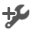
<style>
.page{position:relative;width:32px;height:32px;background:#ffffff}
.page>*{position:absolute;margin:0}
.t1{font:25.7px "CourierNewPS-BoldMT";letter-spacing:-0.005em;color:#555555}
</style>
<div class="page">
<p class="t1" style="left:2px;top:7px;width:14px;height:13px">+</p>
</div>
